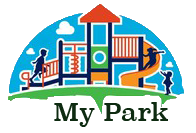
<style>
.page{position:relative;width:196px;height:133px;background:#ffffff}
.page>*{position:absolute;margin:0}
.t1{font:24px "Superclarendon-Regular";color:#0e2b11}
</style>
<div class="page">
<p class="t1" style="left:54px;top:102px;width:114px;height:25px">My Park</p>
</div>
